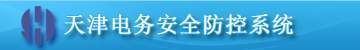
<style>
.page{position:relative;width:360px;height:50px}
.page>*{position:absolute;margin:0}
.t1{font:22px "NSimSun";letter-spacing:0.025em;color:#ffffff;font-weight:bold}
</style>
<div class="page">
<p class="t1" style="left:64px;top:13px;width:229px;height:22px">天津电务安全防控系统</p>
</div>
